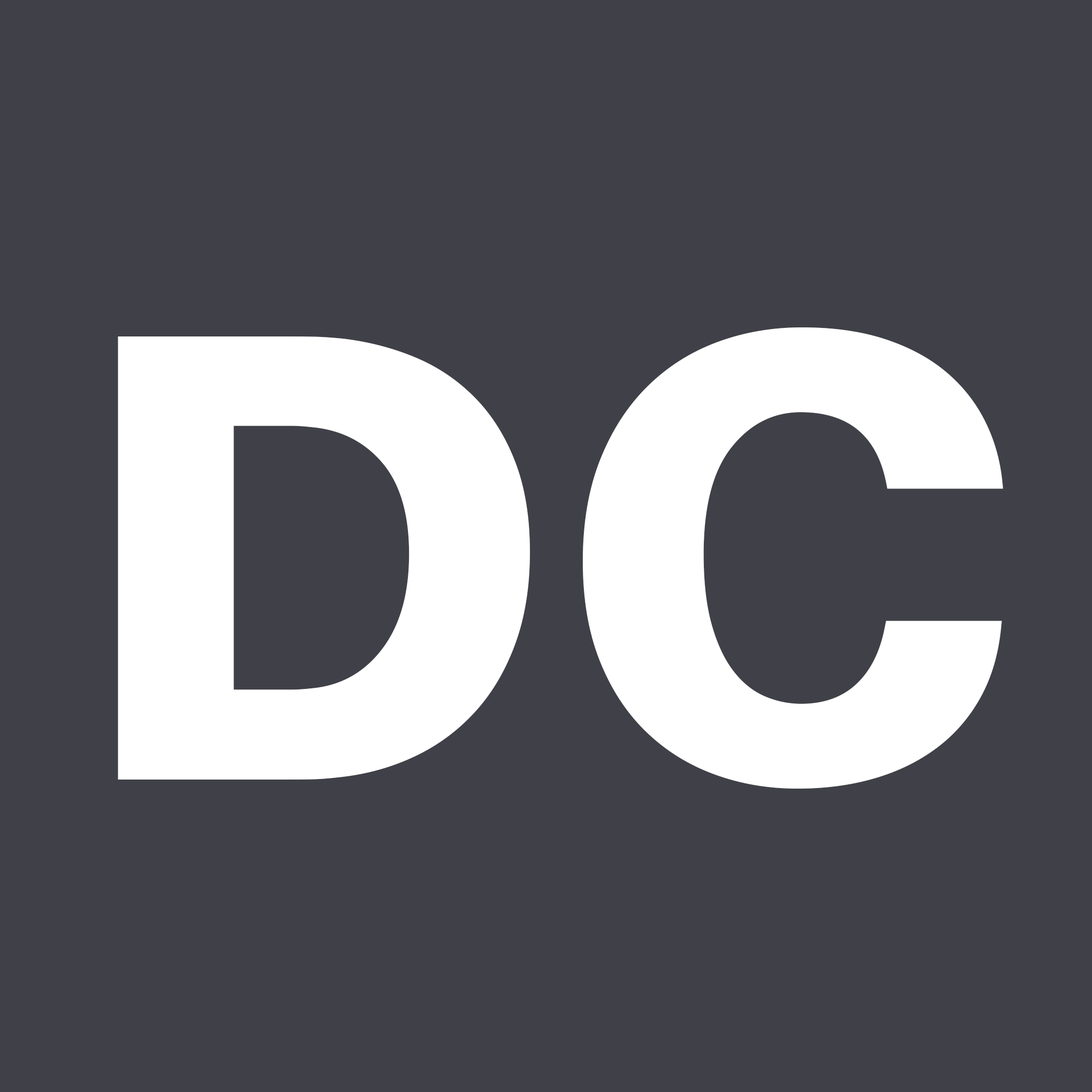
<style>
.page{position:relative;width:1092px;height:1092px;background:#404048}
.page>*{position:absolute;margin:0}
.t1{font:642.6px "Aileron-Black";color:#ffffff}
</style>
<div class="page">
<p class="t1" style="left:118px;top:327px;width:885px;height:462px">DC</p>
</div>
